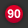
<style>
.page{position:relative;width:28px;height:28px;background:#333333}
.page>*{position:absolute;margin:0}
.t1{font:12px "Arial-BoldMT";color:#ffffff}
</style>
<div class="page">
<p class="t1" style="left:7px;top:9px;width:14px;height:9px">90</p>
</div>
